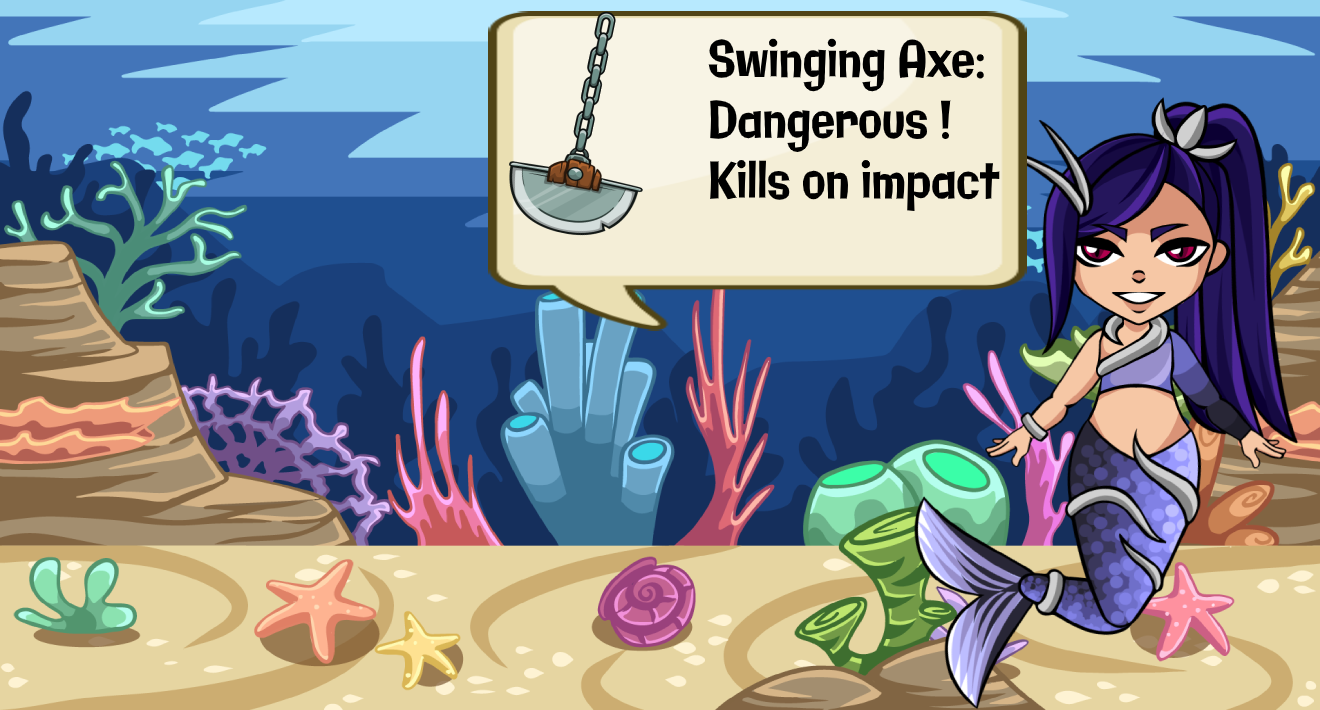
<style>
.page{position:relative;width:1320px;height:710px}
.page>*{position:absolute;margin:0}
.t1{font:50.5px "Galindo-Regular";color:#000000;scale:0.77 1}
</style>
<div class="page">
<p class="t1" style="left:708px;top:38px;width:292px;height:173px">Swinging Axe: <br>Dangerous !<br>Kills on impact</p>
</div>
